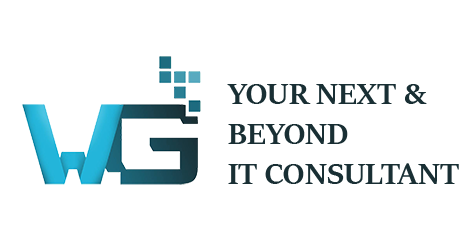
<style>
.page{position:relative;width:475px;height:250px;background:#ffffff}
.page>*{position:absolute;margin:0}
.t1{font:33.3px "SitkaBanner-Bold";color:#192f34}
</style>
<div class="page">
<p class="t1" style="left:227px;top:84px;width:232px;height:100px">YOUR NEXT &amp;<br>BEYOND<br>IT CONSULTANT</p>
</div>
